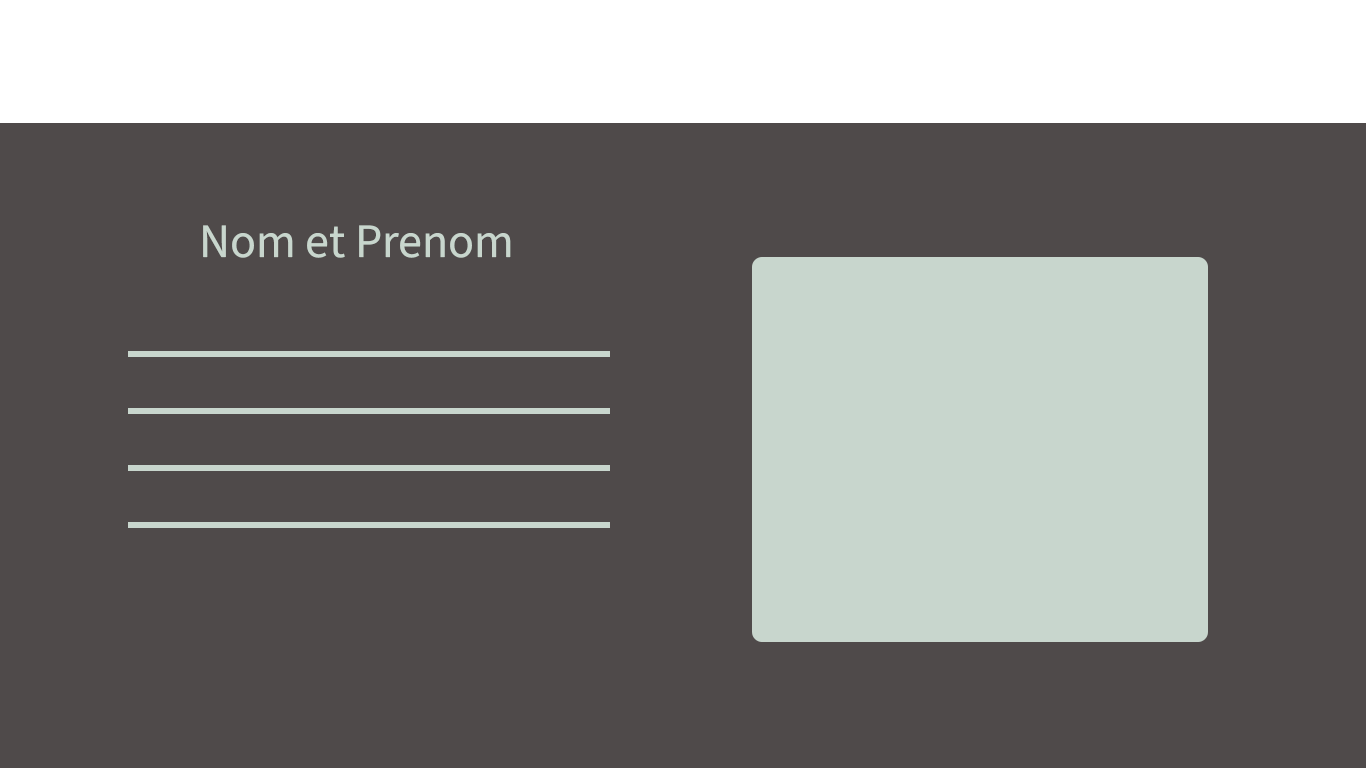
<style>
.page{position:relative;width:1366px;height:768px;background:#4f4a4a}
.page>*{position:absolute;margin:0}
.t1{font:48px "SourceSansRoman-Regular";color:#c8d6cd}
</style>
<div class="page">
<p class="t1" style="left:203px;top:225px;width:308px;height:33px">Nom et Prenom</p>
</div>
